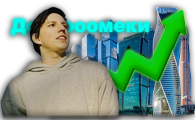
<style>
.page{position:relative;width:195px;height:120px}
.page>*{position:absolute;margin:0}
.t1{font:18px "Arial-Black";color:#00fff0}
</style>
<div class="page">
<p class="t1" style="left:11px;top:19px;width:138px;height:16px">Доооооомеки</p>
</div>
